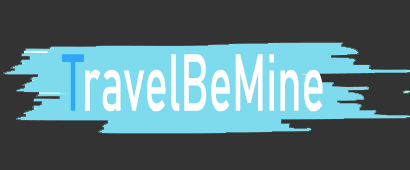
<style>
.page{position:relative;width:410px;height:170px;background:#333333}
.page>*{position:absolute;margin:0}
.t1{font:79px "Bahnschrift";color:#ffffff;scale:0.55 1}
.t2{font:79px "Bahnschrift";color:#2ea7fb;scale:0.55 1}
</style>
<div class="page">
<p class="t1" style="left:62px;top:54px;width:261px;height:58px"><span class="t2">T</span>ravelBeMine</p>
</div>
